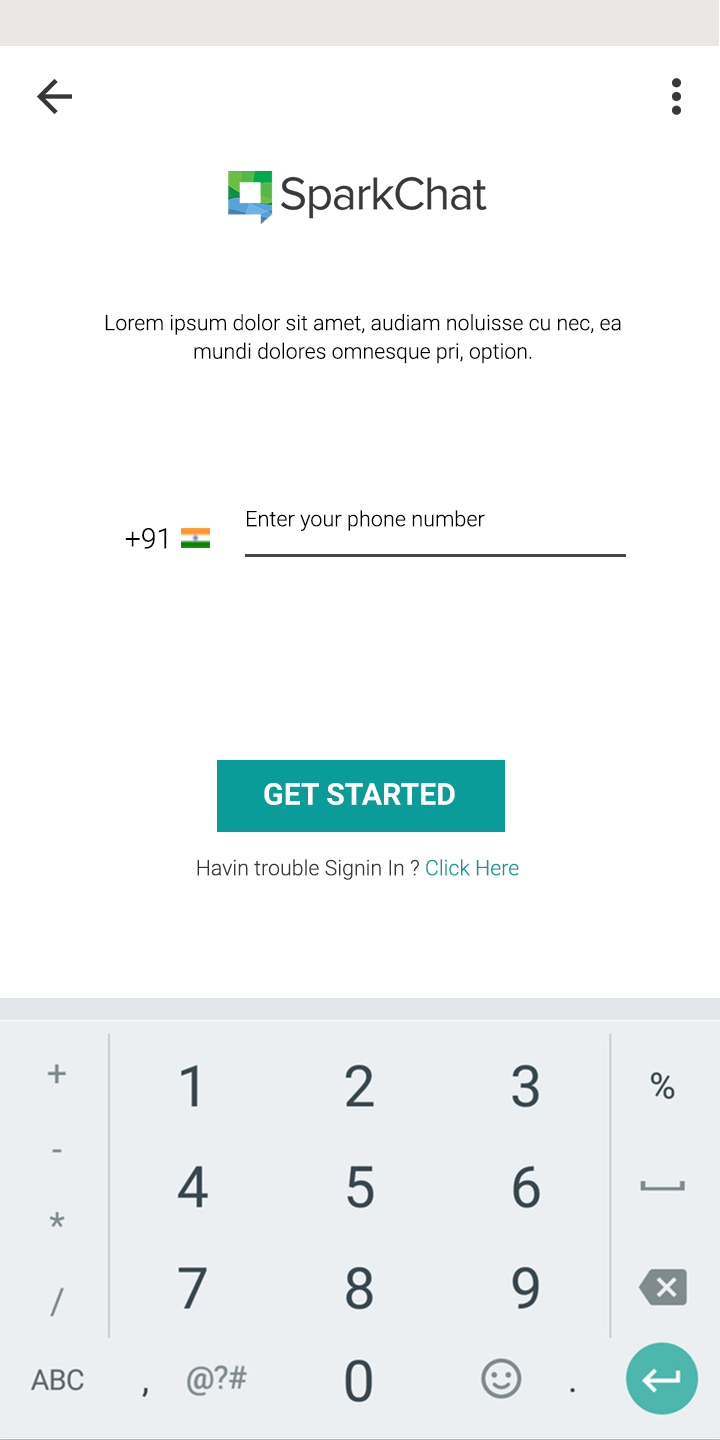
<style>
.page{position:relative;width:720px;height:1440px;background:#ffffff}
.page>*{position:absolute;margin:0}
.t1{font:21.3px/28.4px "Roboto-Light";color:#000000}
.t2{font:21.3px "Roboto-Light";color:#000000}
.t3{font:28.4px "Roboto-Light";color:#000000}
.t4{font:30.2px "Roboto-Bold";color:#ffffff}
.t5{font:21.3px "Roboto-Light";color:#383838}
.t6{font:21.3px "Roboto-Light";color:#099c98}
</style>
<div class="page">
<p class="t1" style="left:105px;top:314px;width:516px;height:50px;text-align:center">Lorem ipsum dolor sit amet, audiam noluisse cu nec, ea mundi dolores omnesque pri, option.</p>
<p class="t2" style="left:247px;top:510px;width:238px;height:21px">Enter your phone number</p>
<p class="t3" style="left:125px;top:528px;width:42px;height:21px">+91</p>
<p class="t4" style="left:264px;top:783px;width:191px;height:22px">GET STARTED</p>
<p class="t5" style="left:197px;top:859px;width:322px;height:21px">Havin trouble Signin In ? <span class="t6">Click Here</span></p>
</div>
